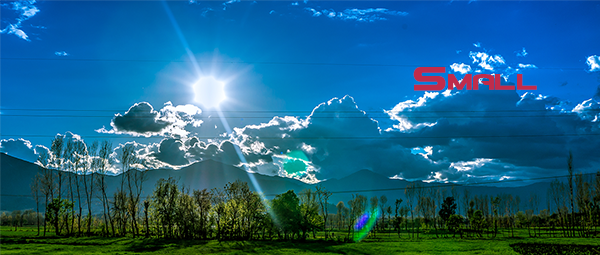
<style>
.page{position:relative;width:600px;height:255px}
.page>*{position:absolute;margin:0}
.t1{font:28.7px "BDNippori-2005";letter-spacing:0.01em;color:#bf2c4b;font-variant:small-caps;font-weight:bold;scale:1.25 1}
</style>
<div class="page">
<p class="t1" style="left:413px;top:67px;width:124px;height:24px">Small</p>
</div>
